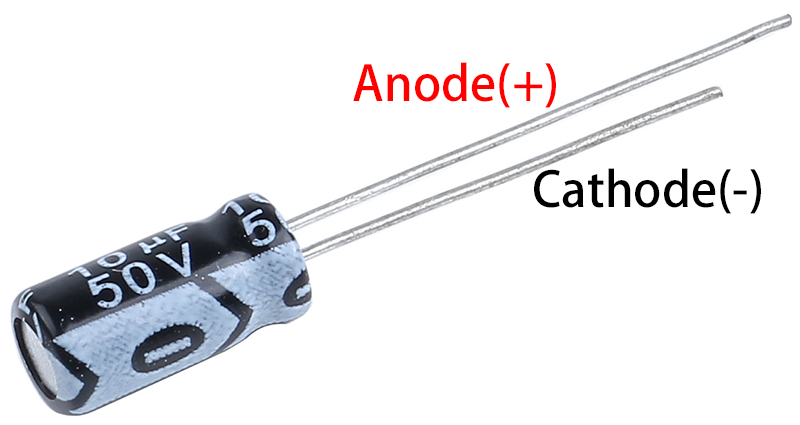
<style>
.page{position:relative;width:800px;height:425px;background:#ffffff}
.page>*{position:absolute;margin:0}
.t1{font:48px "AdobeHeitiStd-Regular";color:#ff0000}
.t2{font:48px "AdobeHeitiStd-Regular";color:#000000}
</style>
<div class="page">
<p class="t1" style="left:353px;top:62px;width:203px;height:46px">Anode(+)</p>
<p class="t2" style="left:534px;top:168px;width:227px;height:46px">Cathode(-)</p>
</div>
